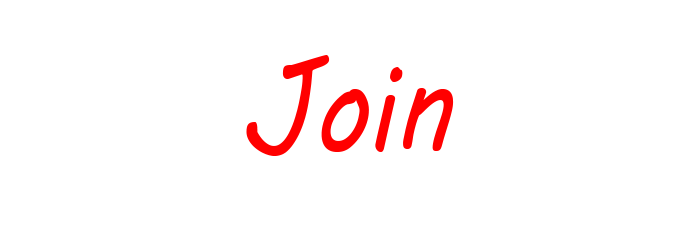
<style>
.page{position:relative;width:700px;height:250px;background:#ffffff}
.page>*{position:absolute;margin:0}
.t1{font:125px "MVBoli";color:#ff0000;scale:0.84 1}
</style>
<div class="page">
<p class="t1" style="left:246px;top:55px;width:208px;height:101px">Join</p>
</div>
